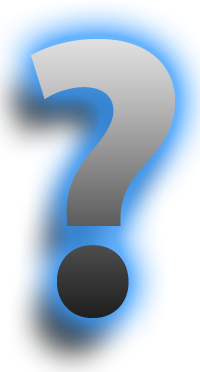
<style>
.page{position:relative;width:200px;height:372px}
.page>*{position:absolute;margin:0}
.t1{font:400px "MyriadPro-Bold"}
</style>
<div class="page">
<p class="t1" style="left:31px;top:39px;width:144px;height:279px">?</p>
</div>
